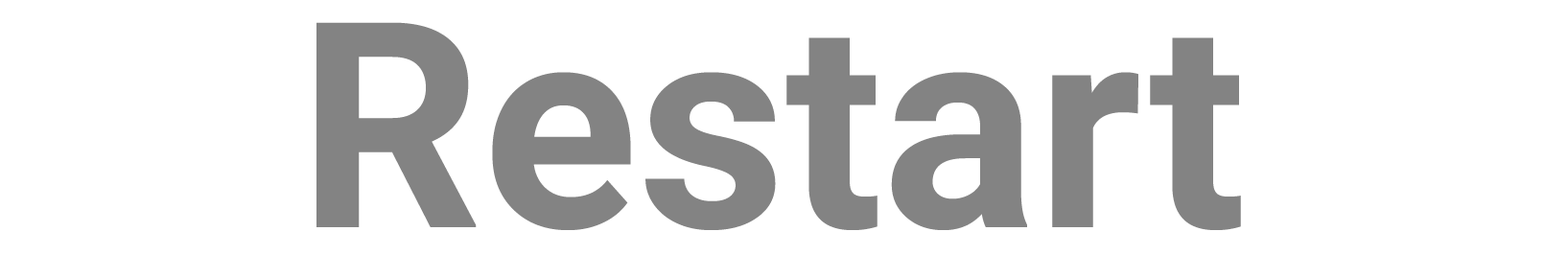
<style>
.page{position:relative;width:1568px;height:255px;background:#ffffff}
.page>*{position:absolute;margin:0}
.t1{font:287.7px "Roboto-Bold";color:#838383}
</style>
<div class="page">
<p class="t1" style="left:316px;top:22px;width:925px;height:208px">Restart</p>
</div>
